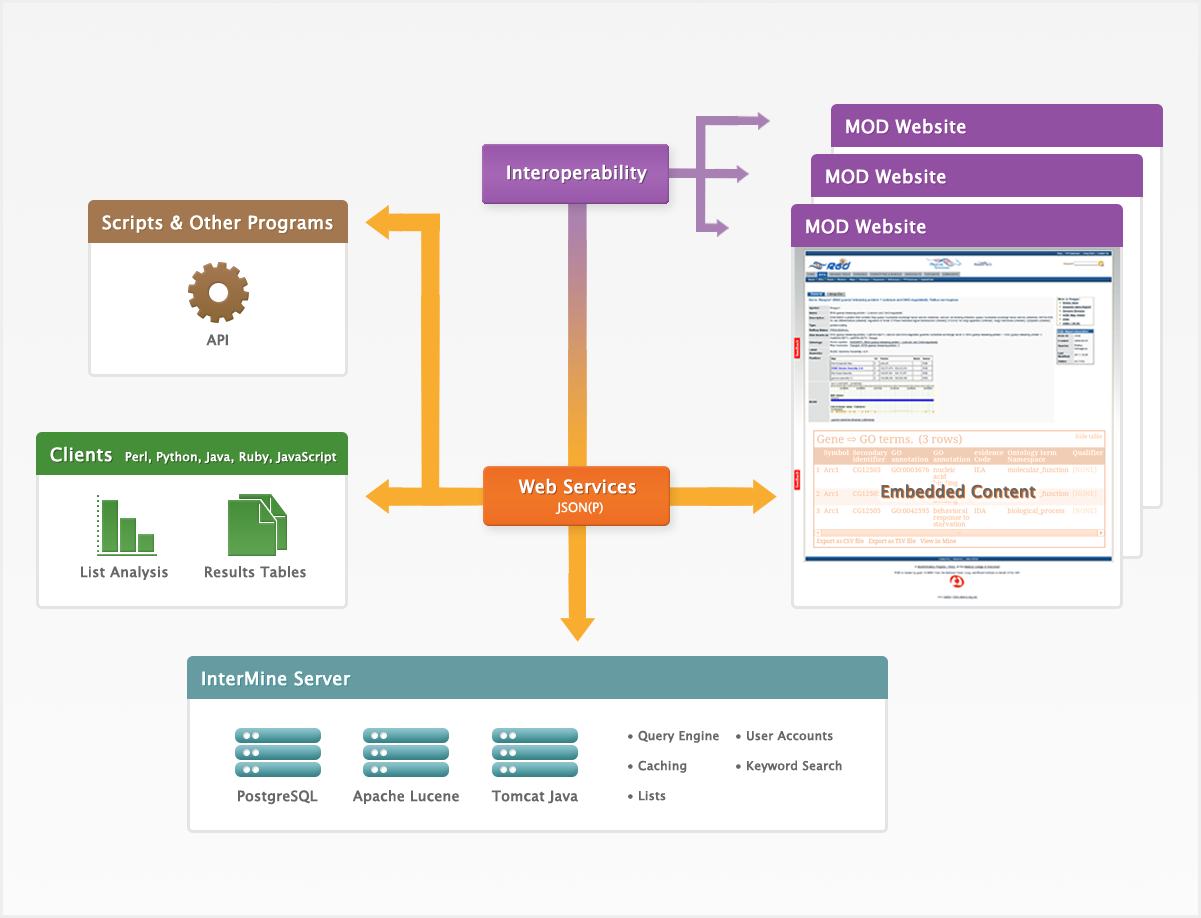
<style>
.page{position:relative;width:1201px;height:918px}
.page>*{position:absolute;margin:0}
.t1{font:18px "LucidaGrande";color:#ffffff;font-weight:bold}
.t2{font:18px "LucidaGrande";font-weight:bold}
.t3{font:14px "LucidaGrande";color:#676767;font-weight:bold}
.t4{font:12px "LucidaGrande";color:#ffffff;font-weight:bold}
.t5{font:16px "LucidaGrande";color:#676767;font-weight:bold}
.t6{font:16px "LucidaGrande";font-weight:bold}
.t7{font:13px "LucidaGrande";color:#ffffff}
.t8{font:12px/30px "LucidaGrande";color:#676767;font-weight:bold}
</style>
<div class="page">
<p class="t1" style="left:846px;top:118px;width:120px;height:16px">MOD Website</p>
<p class="t2" style="left:847px;top:119px;width:120px;height:16px">MOD Website</p>
<p class="t1" style="left:507px;top:164px;width:140px;height:19px">Interoperability</p>
<p class="t2" style="left:508px;top:165px;width:140px;height:19px">Interoperability</p>
<p class="t1" style="left:826px;top:168px;width:120px;height:16px">MOD Website</p>
<p class="t2" style="left:827px;top:169px;width:120px;height:16px">MOD Website</p>
<p class="t1" style="left:102px;top:214px;width:231px;height:19px">Scripts &amp; Other Programs</p>
<p class="t2" style="left:103px;top:215px;width:231px;height:19px">Scripts &amp; Other Programs</p>
<p class="t1" style="left:806px;top:218px;width:120px;height:16px">MOD Website</p>
<p class="t2" style="left:807px;top:219px;width:120px;height:16px">MOD Website</p>
<p class="t3" style="left:206px;top:334px;width:22px;height:12px">API</p>
<p class="t1" style="left:50px;top:446px;width:62px;height:16px">Clients</p>
<p class="t2" style="left:51px;top:447px;width:62px;height:16px">Clients</p>
<p class="t4" style="left:125px;top:451px;width:212px;height:13px">Perl, Python, Java, Ruby, JavaScript</p>
<p class="t1" style="left:518px;top:478px;width:118px;height:16px">Web Services</p>
<p class="t2" style="left:519px;top:479px;width:118px;height:16px">Web Services</p>
<p class="t5" style="left:881px;top:484px;width:154px;height:14px">Embedded Content</p>
<p class="t6" style="left:882px;top:485px;width:154px;height:14px">Embedded Content</p>
<p class="t7" style="left:555px;top:501px;width:48px;height:13px">JSON(P)</p>
<p class="t3" style="left:81px;top:566px;width:87px;height:14px">List Analysis</p>
<p class="t3" style="left:205px;top:566px;width:101px;height:12px">Results Tables</p>
<p class="t1" style="left:202px;top:671px;width:149px;height:15px">InterMine Server</p>
<p class="t2" style="left:203px;top:672px;width:149px;height:15px">InterMine Server</p>
<p class="t8" style="left:628px;top:730px;width:214px;height:71px">• Query Engine • User Accounts<br>• Caching  • Keyword Search<br>• Lists</p>
<p class="t3" style="left:238px;top:790px;width:80px;height:15px">PostgreSQL</p>
<p class="t3" style="left:352px;top:790px;width:107px;height:14px">Apache Lucene</p>
<p class="t3" style="left:491px;top:790px;width:87px;height:14px">Tomcat Java</p>
</div>
